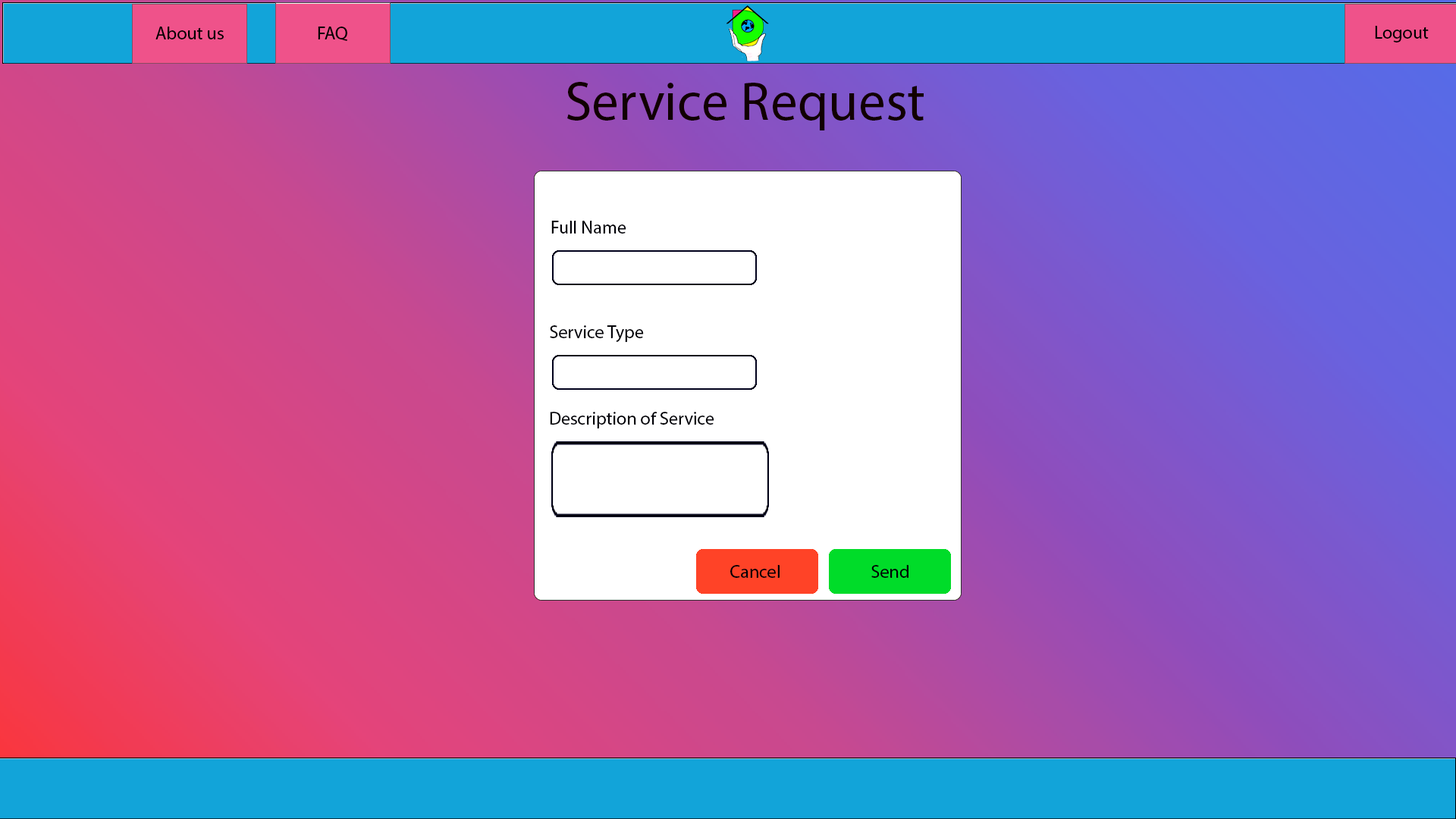
<style>
.page{position:relative;width:1456px;height:819px}
.page>*{position:absolute;margin:0}
.t1{font:18.2px "MyriadPro-Regular";color:#000000}
.t2{font:54.6px "MyriadPro-Regular";color:#110000}
.t3{font:18.2px "MyriadPro-Regular";color:#000006}
.t4{font:18.2px "MyriadPro-Regular";color:#ffffff}
</style>
<div class="page">
<p class="t1" style="left:155px;top:27px;width:69px;height:12px">About us</p>
<p class="t1" style="left:318px;top:27px;width:29px;height:14px">FAQ</p>
<p class="t1" style="left:1375px;top:26px;width:54px;height:16px">Logout</p>
<p class="t2" style="left:567px;top:82px;width:357px;height:48px">Service Request</p>
<p class="t3" style="left:551px;top:221px;width:90px;height:13px">Full Name<span class="t4">m</span></p>
<p class="t3" style="left:550px;top:325px;width:94px;height:17px">Service Type</p>
<p class="t3" style="left:550px;top:412px;width:179px;height:16px">Description of Service<span class="t4">m</span></p>
<p class="t3" style="left:730px;top:565px;width:50px;height:13px">Cancel</p>
<p class="t3" style="left:871px;top:565px;width:37px;height:13px">Send</p>
</div>
